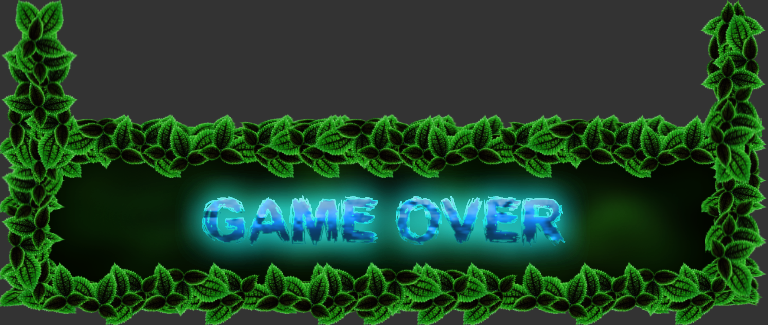
<style>
.page{position:relative;width:768px;height:325px;background:#333333}
.page>*{position:absolute;margin:0}
.t1{font:60px "SplinterWood";text-transform:uppercase}
</style>
<div class="page">
<p class="t1" style="left:202px;top:195px;width:364px;height:52px">GAME OVER</p>
<p class="t1" style="left:202px;top:195px;width:364px;height:52px">GAME OVER</p>
<p class="t1" style="left:202px;top:195px;width:364px;height:52px">GAME OVER</p>
</div>
